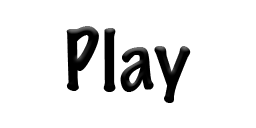
<style>
.page{position:relative;width:256px;height:128px;background:#ffffff}
.page>*{position:absolute;margin:0}
.t1{font:75px "MarkerFelt-Thin";color:#000000}
</style>
<div class="page">
<p class="t1" style="left:66px;top:26px;width:125px;height:77px">Play</p>
</div>
